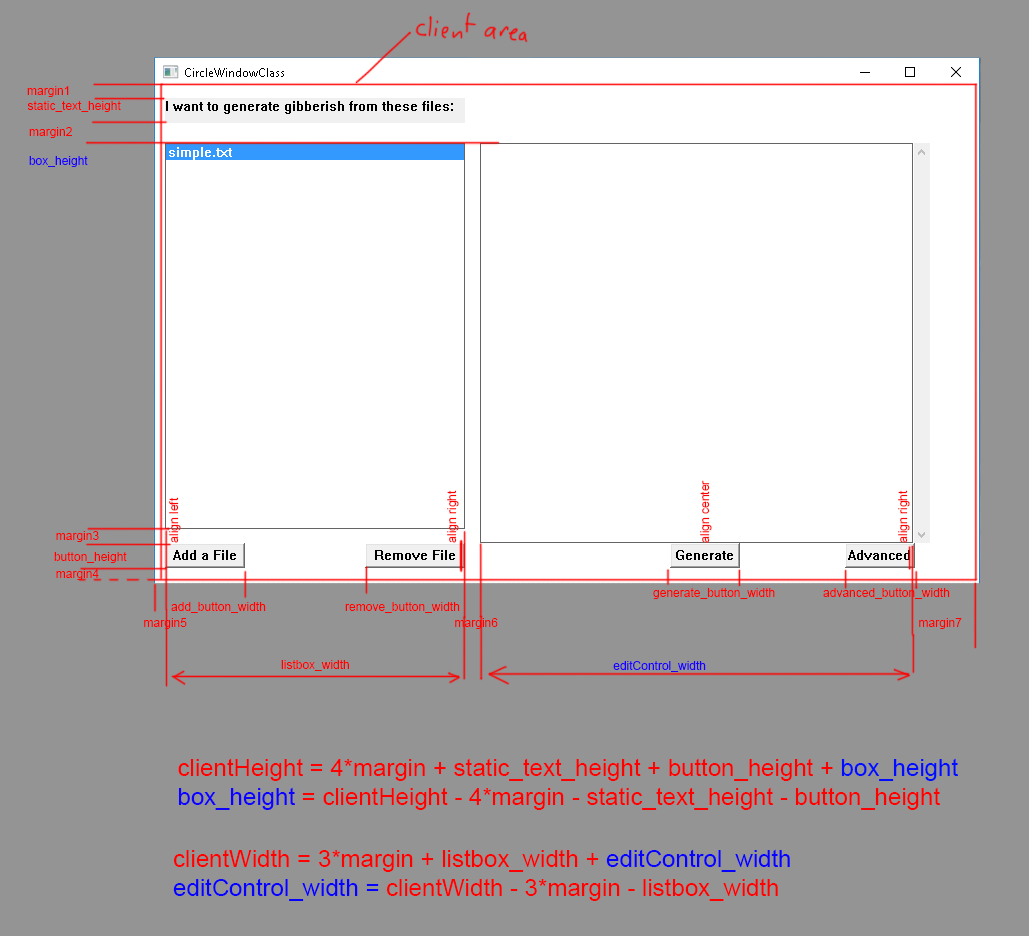
<style>
.page{position:relative;width:1029px;height:936px;background:#949494}
.page>*{position:absolute;margin:0}
.t1{font:12px "ArialMT";color:#ff0000}
.t2{font:12px "ArialMT";color:#1800ff}
.t3{font:24px "ArialMT";color:#ff0000}
.t4{font:24px "ArialMT";color:#000cff}
.t5{font:24px "ArialMT";color:#0c00ff}
.t6{font:24px "ArialMT";color:#0600ff}
</style>
<div class="page">
<p class="t1" style="left:27px;top:86px;width:42px;height:11px">margin1</p>
<p class="t1" style="left:27px;top:101px;width:94px;height:11px">static_text_height</p>
<p class="t1" style="left:29px;top:127px;width:43px;height:11px">margin2</p>
<p class="t2" style="left:29px;top:156px;width:59px;height:11px">box_height</p>
<p class="t1" style="left:700px;top:480px;width:12px;height:63px;rotate:-90deg">align center</p>
<p class="t1" style="left:169px;top:497px;width:12px;height:46px;rotate:-90deg">align left</p>
<p class="t1" style="left:447px;top:490px;width:12px;height:53px;rotate:-90deg">align right</p>
<p class="t1" style="left:898px;top:490px;width:12px;height:53px;rotate:-90deg">align right</p>
<p class="t1" style="left:56px;top:531px;width:43px;height:11px">margin3</p>
<p class="t1" style="left:54px;top:552px;width:73px;height:11px">button_height</p>
<p class="t1" style="left:56px;top:569px;width:43px;height:11px">margin4</p>
<p class="t1" style="left:653px;top:588px;width:122px;height:11px">generate_button_width</p>
<p class="t1" style="left:823px;top:588px;width:127px;height:11px">advanced_button_width</p>
<p class="t1" style="left:171px;top:602px;width:95px;height:11px">add_button_width</p>
<p class="t1" style="left:345px;top:602px;width:115px;height:11px">remove_button_width</p>
<p class="t1" style="left:144px;top:618px;width:43px;height:11px">margin5</p>
<p class="t1" style="left:455px;top:618px;width:43px;height:11px">margin6</p>
<p class="t1" style="left:919px;top:618px;width:43px;height:11px">margin7</p>
<p class="t1" style="left:281px;top:660px;width:68px;height:11px">listbox_width</p>
<p class="t2" style="left:613px;top:661px;width:93px;height:11px">editControl_width</p>
<p class="t3" style="left:178px;top:758px;width:780px;height:52px">clientHeight = 4*margin + static_text_height + button_height + <span class="t4">box_height<br></span><span class="t5">box_height</span> = clientHeight - 4*margin - static_text_height - button_height</p>
<p class="t3" style="left:173px;top:849px;width:617px;height:52px">clientWidth = 3*margin + listbox_width + <span class="t6">editControl_width<br>editControl_width = </span>clientWidth - 3*margin - listbox_width</p>
</div>
